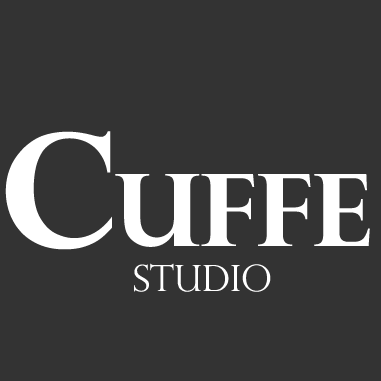
<style>
.page{position:relative;width:381px;height:381px;background:#333333}
.page>*{position:absolute;margin:0}
.t1{font:160px "PerpetuaTitlingMT-Bold";color:#ffffff}
.t2{font:100px "PerpetuaTitlingMT-Bold";color:#ffffff}
.t3{font:36px "PerpetuaTitlingMT-Light";color:#ffffff}
</style>
<div class="page">
<p class="t1" style="left:5px;top:131px;width:107px;height:119px">C</p>
<p class="t2" style="left:115px;top:174px;width:255px;height:73px">uffe</p>
<p class="t3" style="left:134px;top:263px;width:137px;height:29px">studio</p>
</div>
